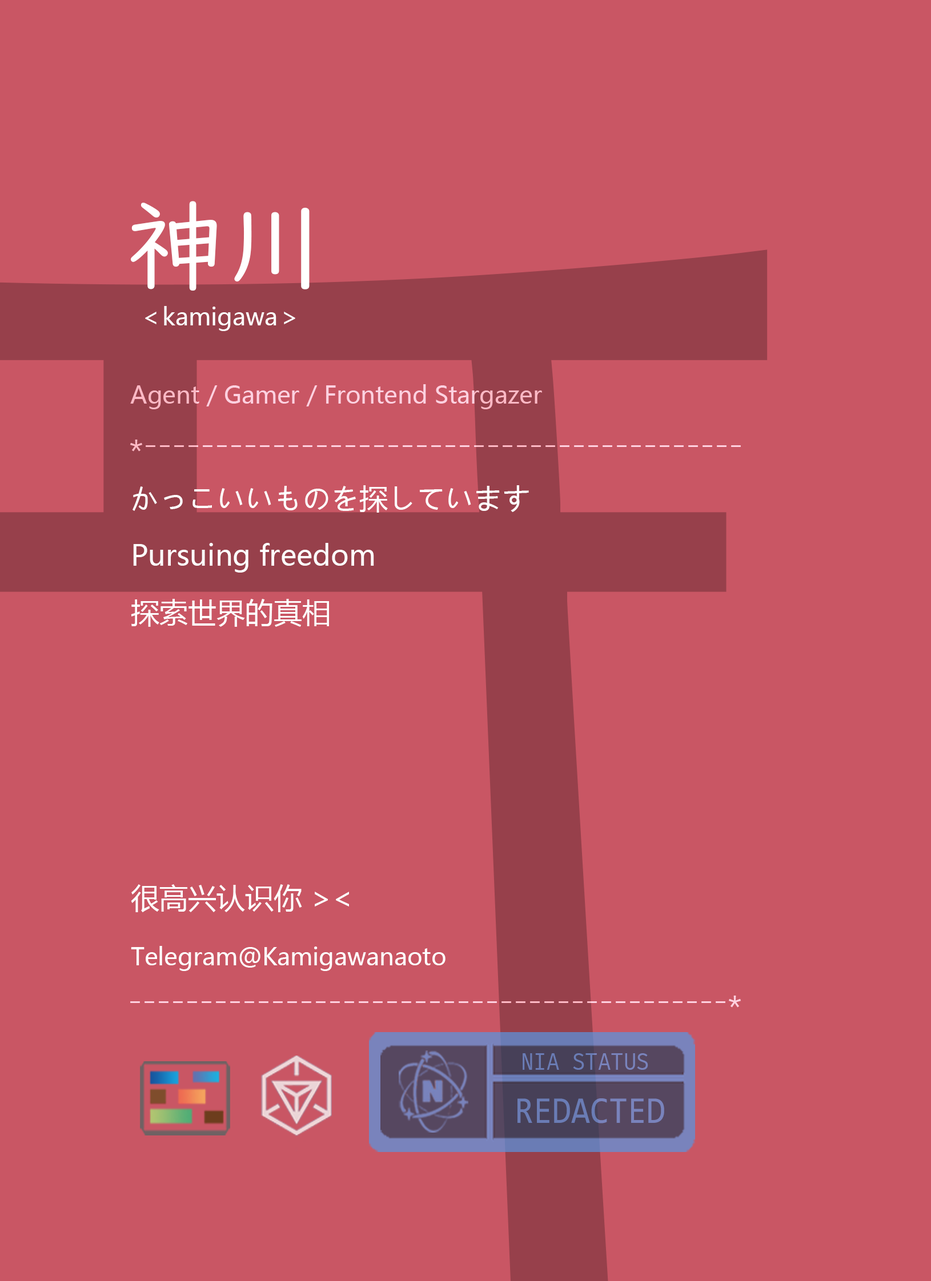
<style>
.page{position:relative;width:931px;height:1281px;background:#c95664}
.page>*{position:absolute;margin:0}
.t1{font:100px "UDDigiKyokashoN-R";color:#ffffff}
.t2{font:23.8px "MicrosoftYaHei";color:#fefefe}
.t3{font:23.8px "MicrosoftYaHei"}
.t4{font:23.8px "FiraCode-Regular";color:#ffd1e0}
.t5{font:28.5px/57.1px "MicrosoftYaHei";color:#fefefe}
.t6{font:23.8px/57.1px "MicrosoftYaHei";color:#ffffff}
.t7{font:23.8px "FiraCode-Regular";color:#6a7cb5;scale:0.9 1}
.t8{font:38.1px "Consolas";color:#6a7cb5;scale:0.9 1}
</style>
<div class="page">
<p class="t1" style="left:131px;top:201px;width:178px;height:90px">神川</p>
<p class="t2" style="left:145px;top:306px;width:150px;height:25px">＜kamigawa＞</p>
<p class="t3" style="left:130px;top:384px;width:412px;height:25px">Agent / Gamer / Frontend Stargazer</p>
<p class="t4" style="left:130px;top:440px;width:611px;height:12px">*------------------------------------------</p>
<p class="t5" style="left:131px;top:485px;width:398px;height:486px">かっこいいものを探しています<br>Pursuing freedom<br>探索世界的真相<br><br><br><br><br>很高兴认识你 &gt;&lt;<br><span class="t6">Telegram@Kamigawanaoto</span></p>
<p class="t4" style="left:130px;top:996px;width:611px;height:12px">------------------------------------------*</p>
<p class="t7" style="left:522px;top:1053px;width:126px;height:17px">NIA STATUS</p>
<p class="t8" style="left:517px;top:1099px;width:147px;height:25px">REDACTED</p>
</div>
